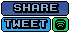
<style>
.page{position:relative;width:70px;height:33px;background:#000000}
.page>*{position:absolute;margin:0}
.t1{font:10px "KarmaticArcade";letter-spacing:-0.005em;color:#000000}
</style>
<div class="page">
<p class="t1" style="left:13px;top:3px;width:46px;height:10px">share</p>
<p class="t1" style="left:4px;top:19px;width:44px;height:10px">TWEET</p>
</div>
